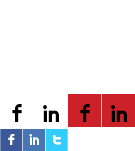
<style>
.page{position:relative;width:135px;height:151px;background:#ffffff}
.page>*{position:absolute;margin:0}
.t1{font:28.6px "Socialico";color:#000000}
.t2{font:29.9px "Socialico";color:#000000}
.t3{font:18.3px "Socialico";letter-spacing:-0.05em;color:#fffefe}
</style>
<div class="page">
<p class="t1" style="left:12px;top:104px;width:10px;height:18px">F</p>
<p class="t2" style="left:43px;top:105px;width:16px;height:17px">I</p>
<p class="t1" style="left:80px;top:104px;width:10px;height:18px">F</p>
<p class="t2" style="left:111px;top:105px;width:16px;height:17px">I</p>
<p class="t3" style="left:8px;top:134px;width:7px;height:11px">F</p>
<p class="t3" style="left:29px;top:134px;width:10px;height:11px">I</p>
<p class="t3" style="left:53px;top:135px;width:8px;height:10px">T</p>
</div>
